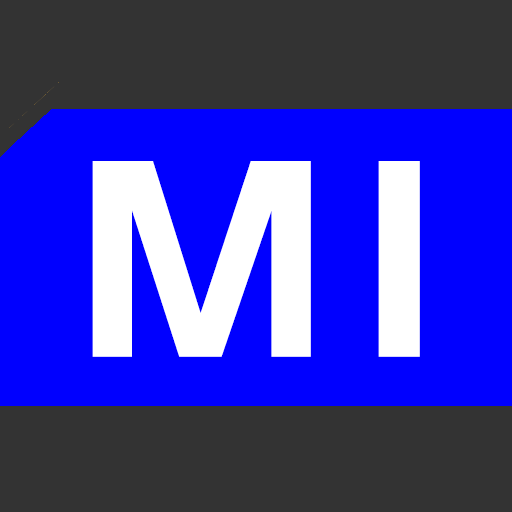
<style>
.page{position:relative;width:512px;height:512px;background:#0000ff}
.page>*{position:absolute;margin:0}
.t1{font:293.5px "786-CAI978";letter-spacing:0.1em;color:#ffffff}
</style>
<div class="page">
<p class="t1" style="left:92px;top:161px;width:328px;height:196px">MI</p>
</div>
